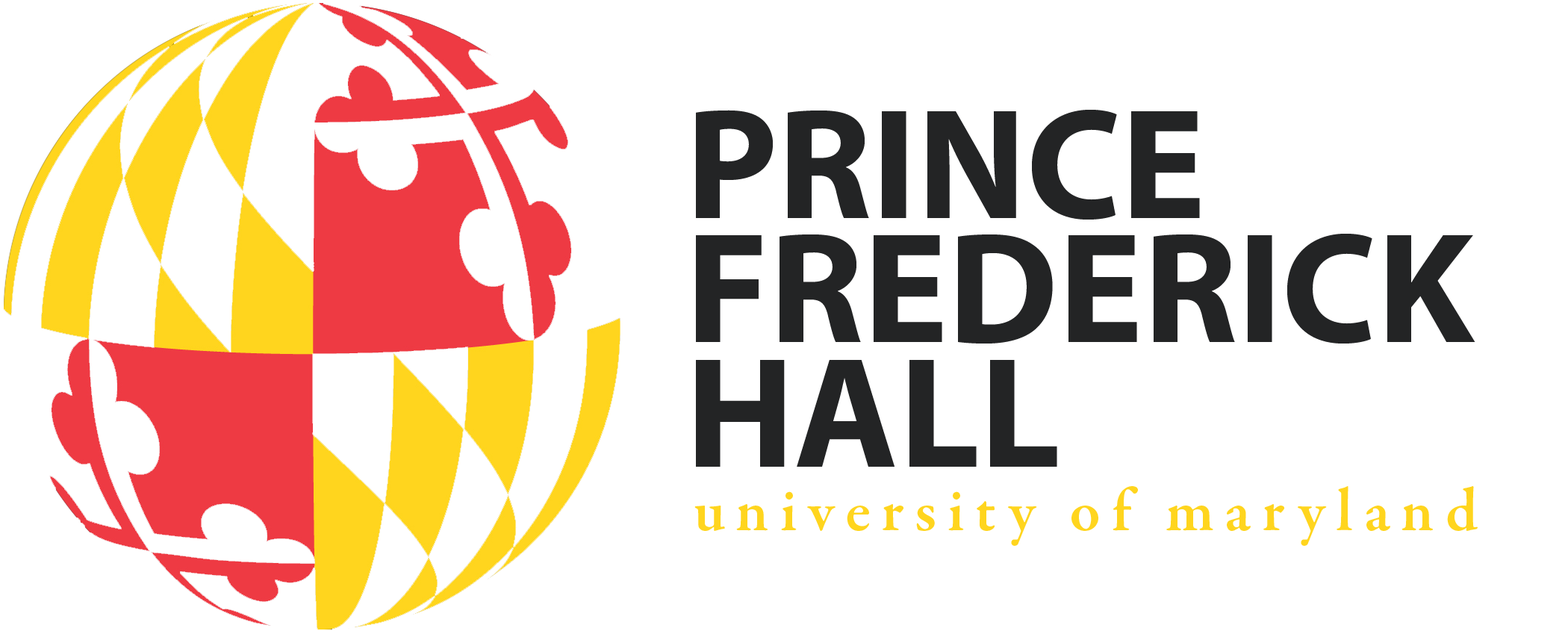
<style>
.page{position:relative;width:1568px;height:631px;background:#ffffff}
.page>*{position:absolute;margin:0}
.t1{font:158.7px/124.4px "MyriadPro-Bold";color:#232425}
.t2{font:62.2px "GaramondPremrPro-Smbd";letter-spacing:0.18em;color:#ffd51e}
</style>
<div class="page">
<p class="t1" style="left:696px;top:110px;width:779px;height:357px">PRINCE<br>FREDERICK <br>HALL</p>
<p class="t2" style="left:694px;top:486px;width:784px;height:60px">university of maryland</p>
</div>
